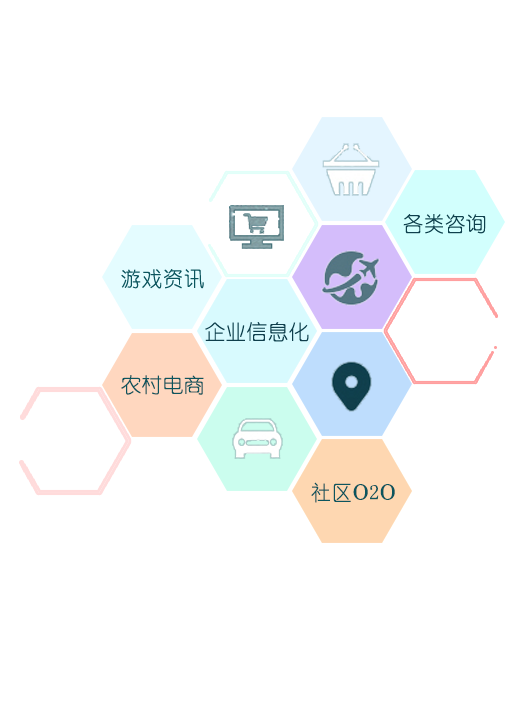
<style>
.page{position:relative;width:526px;height:709px;background:#ffffff}
.page>*{position:absolute;margin:0}
.t1{font:20.8px "YouYuan";letter-spacing:0.01em;color:#0f404d}
.t2{font:20.8px "YouYuan";letter-spacing:0.01em;color:#0c555e}
.t3{font:20.8px "YouYuan";letter-spacing:0.01em;color:#0f3e4c}
.t4{font:20.8px "Century";letter-spacing:0.01em;color:#0c555e}
</style>
<div class="page">
<p class="t1" style="left:403px;top:214px;width:83px;height:20px">各类咨询</p>
<p class="t2" style="left:121px;top:269px;width:83px;height:20px">游戏资讯</p>
<p class="t3" style="left:205px;top:322px;width:104px;height:20px">企业信息化</p>
<p class="t2" style="left:121px;top:375px;width:83px;height:20px">农村电商</p>
<p class="t2" style="left:311px;top:482px;width:84px;height:21px">社区<span class="t4">O</span>2<span class="t4">O</span></p>
</div>
